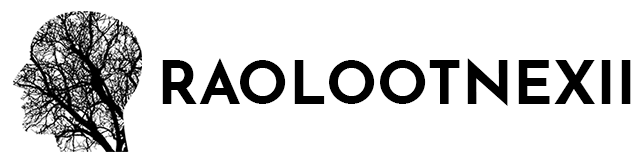
<style>
.page{position:relative;width:642px;height:168px;background:#ffffff}
.page>*{position:absolute;margin:0}
.t1{font:60px "JosefinSans-Bold";color:#000000}
</style>
<div class="page">
<p class="t1" style="left:162px;top:58px;width:469px;height:48px">RAOLOOTNEXII</p>
</div>
